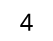
<style>
.page{position:relative;width:53px;height:41px;background:#ffffff}
.page>*{position:absolute;margin:0}
.t1{font:23.7px "DroidSans";color:#000000}
</style>
<div class="page">
<p class="t1" style="left:20px;top:13px;width:13px;height:18px">4</p>
</div>
